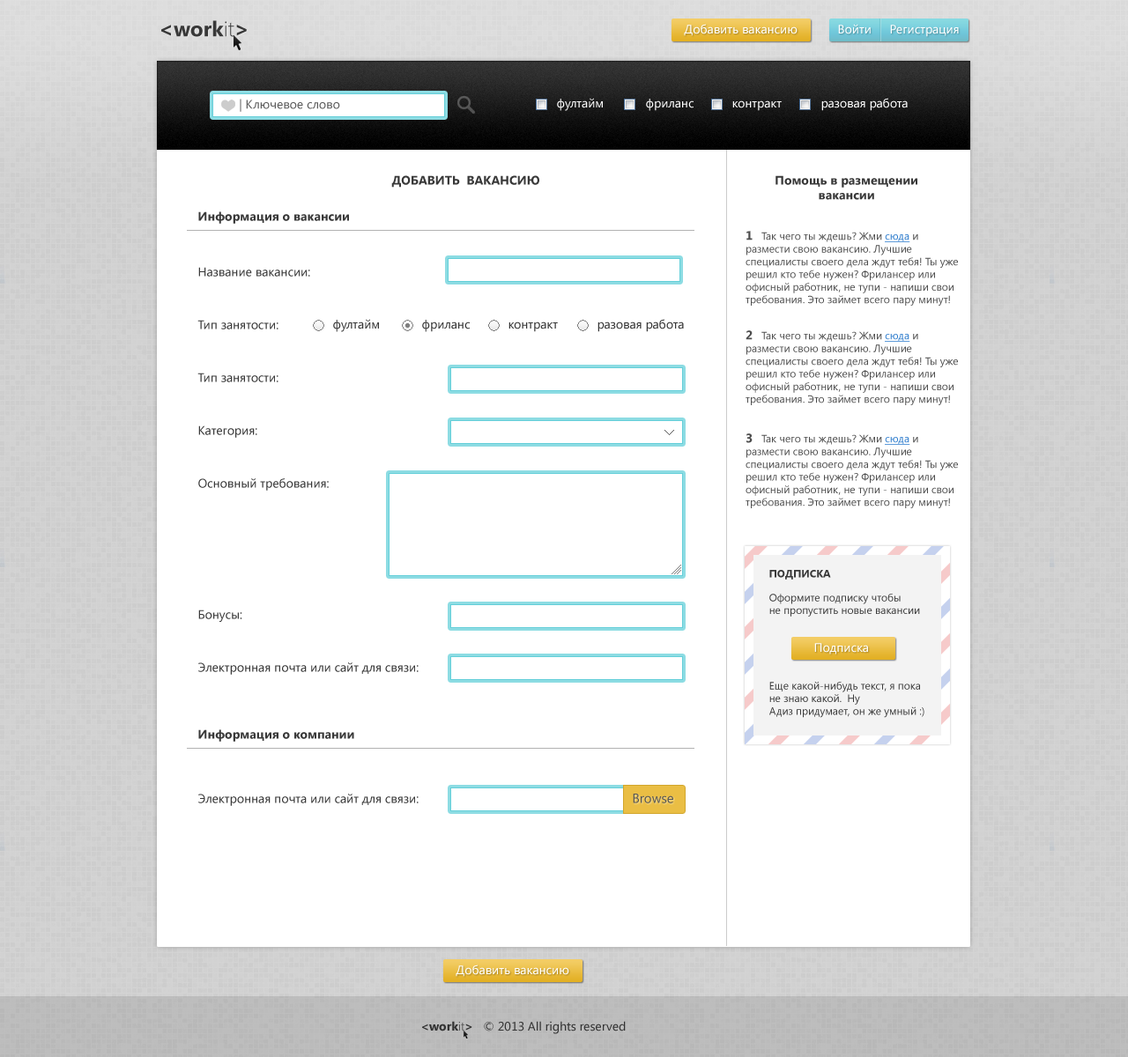
<style>
.page{position:relative;width:1128px;height:1057px;background:#ffffff}
.page>*{position:absolute;margin:0}
.t1{font:21.1px "SegoeUI-Bold";color:#383838}
.t2{font:21.1px "SegoeUI-Light";color:#383838}
.t3{font:12.3px "SegoeUI";color:#ffffff}
.t4{font:12.3px "SegoeUI";color:#5c5c5c}
.t5{font:12.3px "SegoeUI";color:#fdfdfd}
.t6{font:12.3px "SegoeUI-Bold";color:#393939}
.t7{font:10.6px "SegoeUI";color:#4d4d4d}
.t8{font:12.3px "SegoeUI-Bold";color:#4d4d4d}
.t9{font:10.6px "SegoeUI";color:#2a7acc;text-decoration:underline}
.t10{font:12.3px "SegoeUI";color:#393939}
.t11{font:12.3px "SegoeUI";color:#363636}
.t12{font:10.6px "SegoeUI-Bold";color:#393939}
.t13{font:10.6px "SegoeUI";color:#393939}
.t14{font:13.2px "SegoeUI";color:#555555}
.t15{font:12.3px "SegoeUI";color:#333333}
.t16{font:12.3px "SegoeUI-Bold";color:#333333}
.t17{font:12.3px "SegoeUI-Light";color:#333333}
</style>
<div class="page">
<p class="t1" style="left:161px;top:20px;width:86px;height:17px">&lt;work<span class="t2">it</span>&gt;</p>
<p class="t3" style="left:684px;top:24px;width:113px;height:12px">Добавить вакансию</p>
<p class="t3" style="left:838px;top:24px;width:33px;height:10px">Войти</p>
<p class="t3" style="left:890px;top:25px;width:69px;height:12px">Регистрация</p>
<p class="t4" style="left:240px;top:99px;width:100px;height:13px">| Ключевое слово</p>
<p class="t5" style="left:557px;top:98px;width:46px;height:13px">фултайм</p>
<p class="t5" style="left:646px;top:99px;width:47px;height:12px">фриланс</p>
<p class="t5" style="left:732px;top:100px;width:50px;height:11px">контракт</p>
<p class="t5" style="left:821px;top:98px;width:87px;height:13px">разовая работа</p>
<p class="t6" style="left:391px;top:175px;width:148px;height:13px">ДОБАВИТЬ  ВАКАНСИЮ</p>
<p class="t6" style="left:775px;top:175px;width:142px;height:25px;text-align:center">Помощь в размещении<br>вакансии</p>
<p class="t6" style="left:198px;top:211px;width:151px;height:13px">Информация о вакансии</p>
<p class="t7" style="left:745px;top:231px;width:213px;height:75px"><span class="t8">1</span>   Так чего ты ждешь? Жми <span class="t9">сюда</span> и размести свою вакансию. Лучшие специалисты своего дела ждут тебя! Ты уже решил кто тебе нужен? Фрилансер или офисный работник, не тупи - напиши свои требования. Это займет всего пару минут!</p>
<p class="t10" style="left:198px;top:267px;width:112px;height:10px">Название вакансии:</p>
<p class="t10" style="left:197px;top:320px;width:81px;height:10px">Тип занятости:</p>
<p class="t11" style="left:333px;top:319px;width:46px;height:13px">фултайм</p>
<p class="t11" style="left:422px;top:320px;width:48px;height:12px">фриланс</p>
<p class="t11" style="left:508px;top:322px;width:50px;height:10px">контракт</p>
<p class="t11" style="left:597px;top:319px;width:87px;height:13px">разовая работа</p>
<p class="t7" style="left:745px;top:330px;width:213px;height:75px"><span class="t8">2</span>   Так чего ты ждешь? Жми <span class="t9">сюда</span> и размести свою вакансию. Лучшие специалисты своего дела ждут тебя! Ты уже решил кто тебе нужен? Фрилансер или офисный работник, не тупи - напиши свои требования. Это займет всего пару минут!</p>
<p class="t10" style="left:197px;top:373px;width:81px;height:9px">Тип занятости:</p>
<p class="t10" style="left:198px;top:426px;width:59px;height:12px">Категория:</p>
<p class="t7" style="left:745px;top:433px;width:213px;height:75px"><span class="t8">3</span>   Так чего ты ждешь? Жми <span class="t9">сюда</span> и размести свою вакансию. Лучшие специалисты своего дела ждут тебя! Ты уже решил кто тебе нужен? Фрилансер или офисный работник, не тупи - напиши свои требования. Это займет всего пару минут!</p>
<p class="t10" style="left:198px;top:478px;width:131px;height:13px">Основный требования:</p>
<p class="t12" style="left:769px;top:570px;width:62px;height:10px">ПОДПИСКА</p>
<p class="t13" style="left:769px;top:593px;width:151px;height:24px">Оформите подписку чтобы <br>не пропустить новые вакансии</p>
<p class="t10" style="left:198px;top:610px;width:44px;height:12px">Бонусы:</p>
<p class="t3" style="left:814px;top:643px;width:54px;height:12px">Подписка</p>
<p class="t10" style="left:198px;top:663px;width:221px;height:12px">Электронная почта или сайт для связи:</p>
<p class="t13" style="left:769px;top:681px;width:155px;height:37px">Еще какой-нибудь текст, я пока<br>не знаю какой.  Ну <br>Адиз придумает, он же умный :)</p>
<p class="t6" style="left:198px;top:730px;width:156px;height:12px">Информация о компании</p>
<p class="t10" style="left:198px;top:794px;width:221px;height:12px">Электронная почта или сайт для связи:</p>
<p class="t14" style="left:633px;top:794px;width:40px;height:10px">Browse</p>
<p class="t3" style="left:456px;top:965px;width:113px;height:12px">Добавить вакансию</p>
<p class="t15" style="left:422px;top:1021px;width:204px;height:13px"><span class="t16">&lt;work</span><span class="t17">it</span><span class="t16">&gt;   </span>© 2013 All rights reserved</p>
</div>
